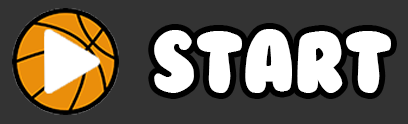
<style>
.page{position:relative;width:408px;height:124px;background:#333333}
.page>*{position:absolute;margin:0}
.t1{font:80px "BubbleGum";color:#ffffff}
</style>
<div class="page">
<p class="t1" style="left:154px;top:29px;width:237px;height:64px">Start</p>
</div>
